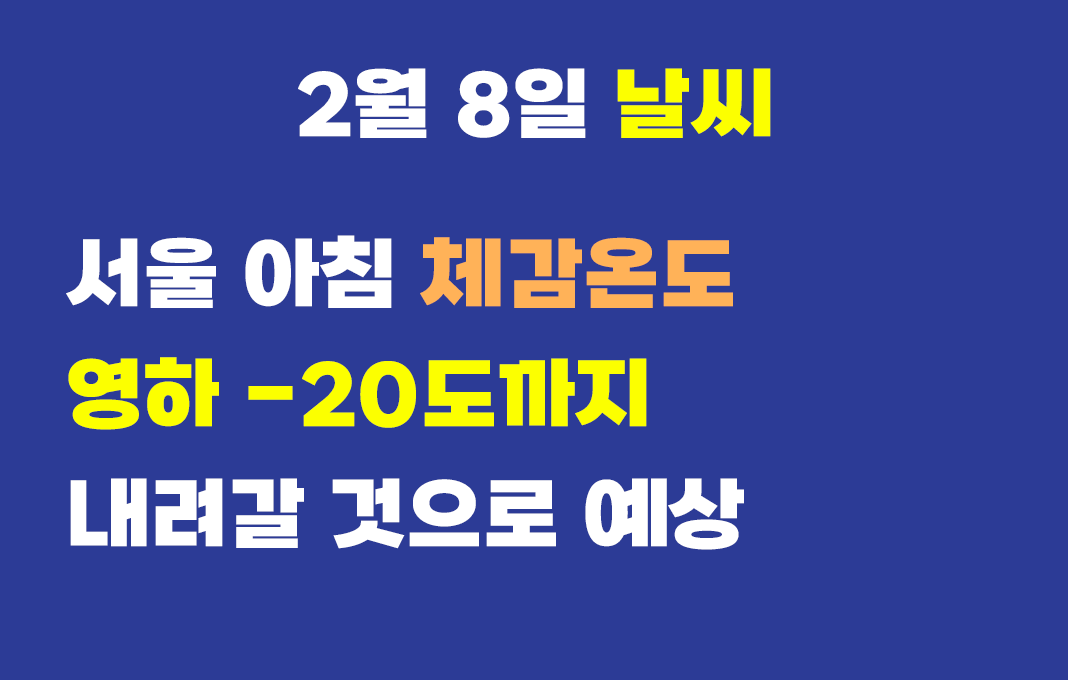
<style>
.page{position:relative;width:1068px;height:680px;background:#2c3b96}
.page>*{position:absolute;margin:0}
.t1{font:80px "SBAggroB";letter-spacing:0.005em;color:#ffffff}
.t2{font:80px "SBAggroB";letter-spacing:0.005em;color:#fcff00}
.t3{font:80px/120px "SBAggroB";letter-spacing:0.005em;color:#ffffff}
.t4{font:80px/120px "SBAggroB";letter-spacing:0.005em;color:#ffb258}
.t5{font:80px/120px "SBAggroB";letter-spacing:0.005em;color:#fcff00}
</style>
<div class="page">
<p class="t1" style="left:298px;top:68px;width:473px;height:70px">2월 8일 <span class="t2">날씨</span></p>
<p class="t3" style="left:66px;top:235px;width:678px;height:315px">서울 아침 <span class="t4">체감온도<br></span><span class="t5">영하 -20도까지<br></span>내려갈 것으로 예상</p>
</div>
